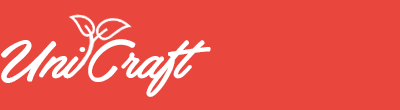
<style>
.page{position:relative;width:400px;height:110px;background:#e9463d}
.page>*{position:absolute;margin:0}
.t1{font:63px "HaydonBrushPERSONALUSE";color:#ffffff}
</style>
<div class="page">
<p class="t1" style="left:1px;top:40px;width:85px;height:43px">Uni</p>
<p class="t1" style="left:88px;top:39px;width:123px;height:58px">Craft</p>
</div>
